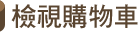
<style>
.page{position:relative;width:139px;height:32px;background:#ffffff}
.page>*{position:absolute;margin:0}
.t1{font:26px "DFHei-Bd-HKP-BF";color:#5a4530}
</style>
<div class="page">
<p class="t1" style="left:11px;top:4px;width:127px;height:25px">檢視購物車</p>
</div>
